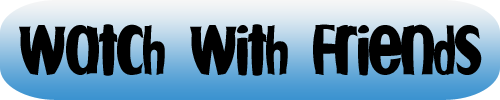
<style>
.page{position:relative;width:500px;height:100px;background:#000000}
.page>*{position:absolute;margin:0}
.t1{font:50px "Fishbowl";color:#000000}
</style>
<div class="page">
<p class="t1" style="left:19px;top:24px;width:463px;height:52px">watch with Friends</p>
</div>
